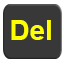
<style>
.page{position:relative;width:64px;height:64px;background:#383838}
.page>*{position:absolute;margin:0}
.t1{font:28px "Arial-BoldMT";color:#ffff00}
</style>
<div class="page">
<p class="t1" style="left:11px;top:20px;width:40px;height:20px">Del</p>
</div>
